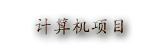
<style>
.page{position:relative;width:160px;height:50px;background:#ffffff}
.page>*{position:absolute;margin:0}
.t1{font:18.7px "¿¬Ìå-Regular";letter-spacing:0.005em}
</style>
<div class="page">
<p class="t1" style="left:35px;top:17px;width:88px;height:18px">计算机项目</p>
</div>
